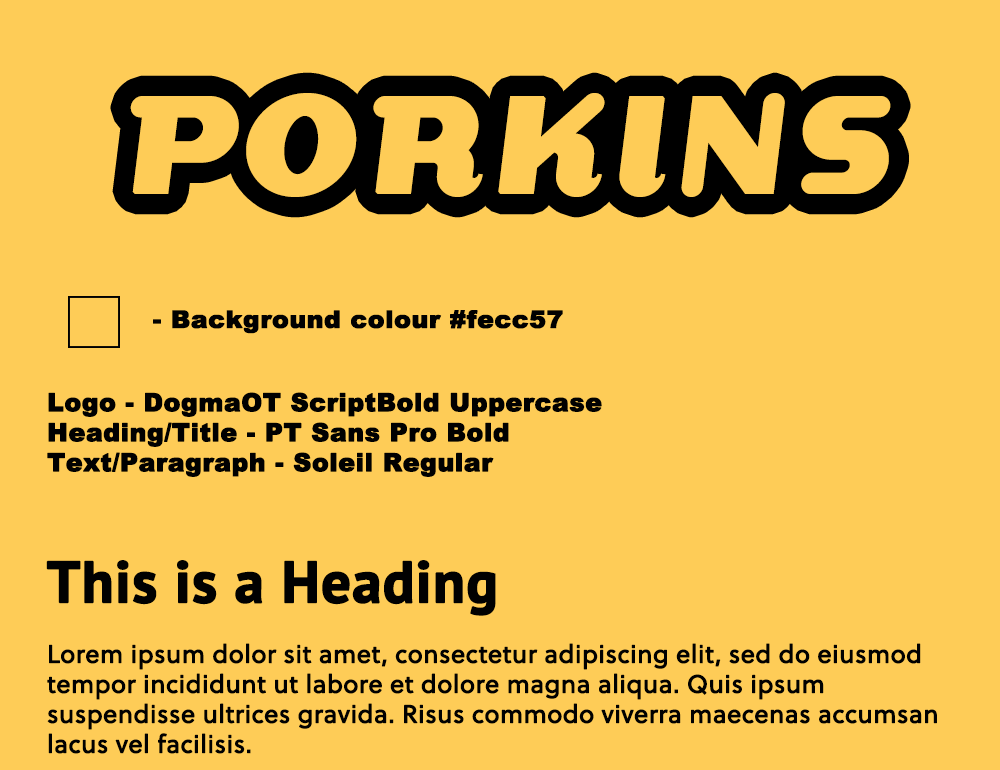
<style>
.page{position:relative;width:1000px;height:770px;background:#fecc57}
.page>*{position:absolute;margin:0}
.t1{font:150px "DogmaOT-ScriptBold";color:#fecc57;font-weight:bold}
.t2{font:24px "Arial-Black";color:#010101;font-weight:bold;scale:1.04 1}
.t3{font:25px "Arial-Black";color:#010101;font-weight:bold}
.t4{font:58.3px "PTSansPro-Bold";color:#010101;font-weight:bold}
.t5{font:25px "Soleil";color:#010101;font-weight:bold}
</style>
<div class="page">
<p class="t1" style="left:130px;top:93px;width:761px;height:104px">PORKINS</p>
<p class="t2" style="left:153px;top:310px;width:410px;height:24px">- Background colour #fecc57</p>
<p class="t3" style="left:47px;top:392px;width:555px;height:85px">Logo - DogmaOT ScriptBold Uppercase<br>Heading/Title - PT Sans Pro Bold<br>Text/Paragraph - Soleil Regular</p>
<p class="t4" style="left:46px;top:560px;width:450px;height:56px">This is a Heading</p>
<p class="t5" style="left:47px;top:643px;width:890px;height:111px">Lorem ipsum dolor sit amet, consectetur adipiscing elit, sed do eiusmod tempor incididunt ut labore et dolore magna aliqua. Quis ipsum suspendisse ultrices gravida. Risus commodo viverra maecenas accumsan lacus vel facilisis.</p>
</div>
